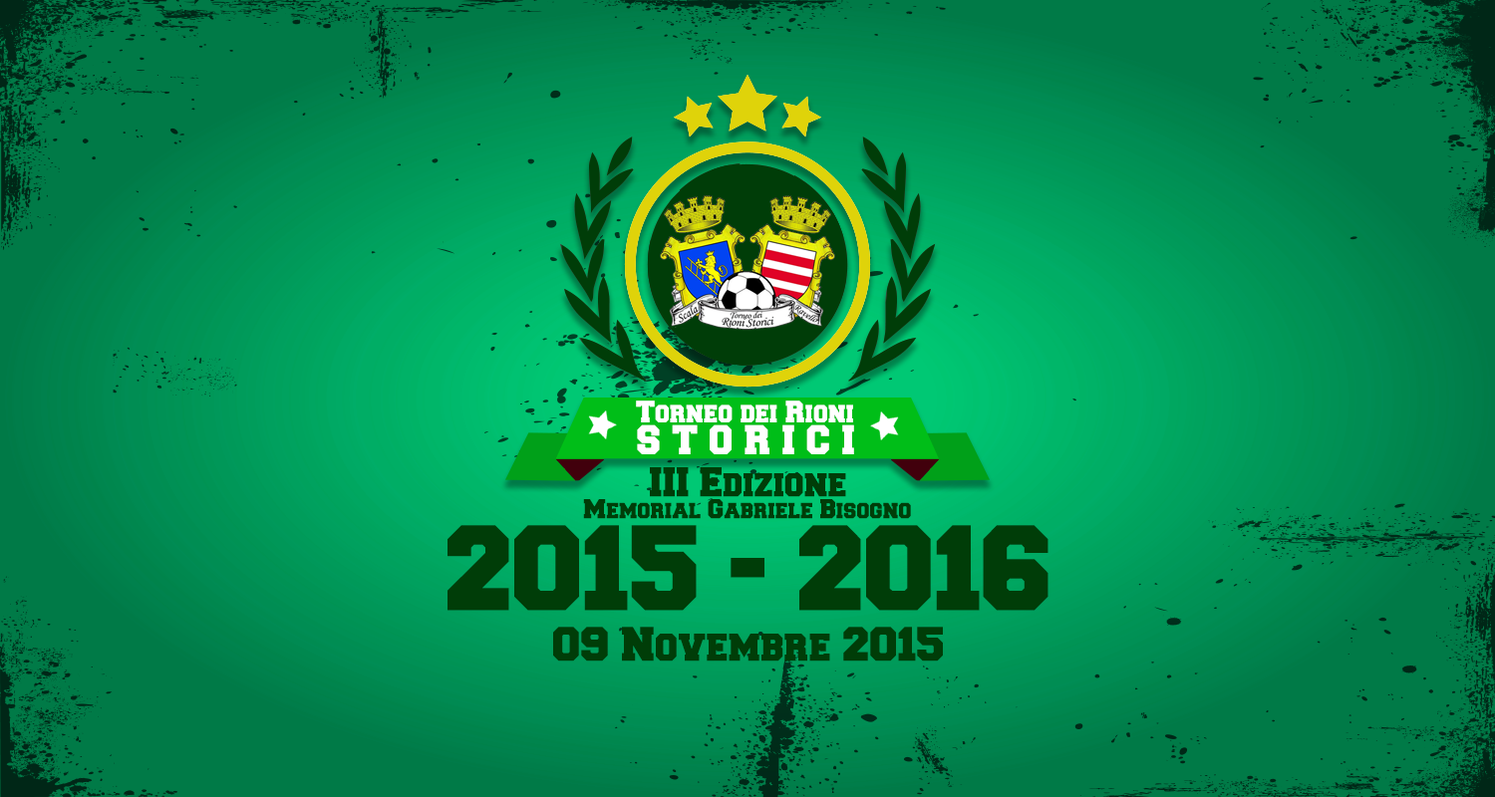
<style>
.page{position:relative;width:1495px;height:797px}
.page>*{position:absolute;margin:0}
.t1{font:26.2px "Freshman";color:#ffffff}
.t2{font:34.9px "Freshman";letter-spacing:0.32em;color:#fffefe}
.t3{font:8.4px/45.7px "Freshman";color:#003d08}
.t4{font:23.3px "Freshman";color:#003d08}
.t5{font:101.8px "Freshman";color:#003d08}
.t6{font:40.7px "Freshman";color:#003d08}
</style>
<div class="page">
<p class="t1" style="left:636px;top:401px;width:217px;height:22px">Torneo dei Rioni</p>
<p class="t2" style="left:637px;top:425px;width:217px;height:30px">STORICI</p>
<p class="t3" style="left:650px;top:468px;width:196px;height:29px;text-align:center">III Edizione</p>
<p class="t4" style="left:583px;top:499px;width:328px;height:20px">Memorial Gabriele Bisogno</p>
<p class="t5" style="left:448px;top:525px;width:601px;height:86px">2015 - 2016</p>
<p class="t6" style="left:553px;top:627px;width:390px;height:35px">09 Novembre 2015</p>
</div>
